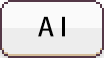
<style>
.page{position:relative;width:104px;height:58px;background:#fafafa}
.page>*{position:absolute;margin:0}
.t1{font:25.9px "AdobeHeitiStd-Regular";color:#000000}
</style>
<div class="page">
<p class="t1" style="left:38px;top:16px;width:27px;height:21px">A I</p>
</div>
